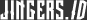
<style>
.page{position:relative;width:87px;height:20px;background:#333333}
.page>*{position:absolute;margin:0}
.t1{font:17px "NEOESPORTRegular";letter-spacing:0.075em;color:#ffffff;font-weight:bold}
.t2{font:17px "NEOESPORTRegular";letter-spacing:0.075em;color:#ffffff;font-weight:bold;font-style:italic}
</style>
<div class="page">
<p class="t1" style="left:0px;top:0px;width:87px;height:20px">JINGERS.<span class="t2">ID</span></p>
</div>
